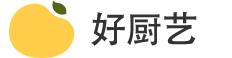
<style>
.page{position:relative;width:232px;height:58px;background:#ffffff}
.page>*{position:absolute;margin:0}
.t1{font:36px "STHeiti";color:#333333}
</style>
<div class="page">
<p class="t1" style="left:91px;top:11px;width:106px;height:35px">好厨艺</p>
</div>
